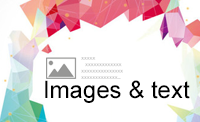
<style>
.page{position:relative;width:200px;height:122px;background:#ffffff}
.page>*{position:absolute;margin:0}
.t1{font:24px "ArialMT";color:#000000}
</style>
<div class="page">
<p class="t1" style="left:45px;top:80px;width:145px;height:23px">Images &amp; text</p>
</div>
